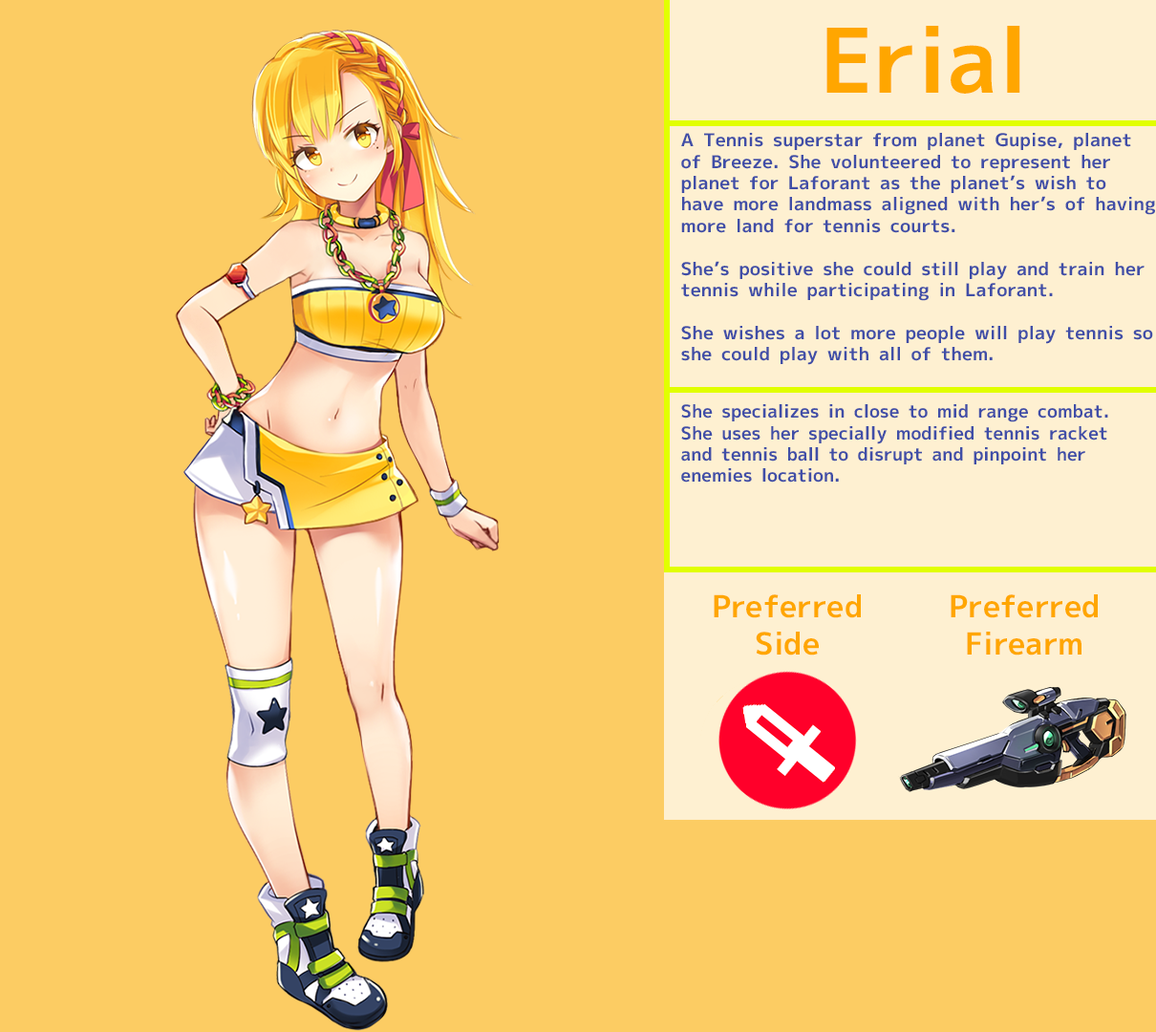
<style>
.page{position:relative;width:1156px;height:1032px;background:#fccc63}
.page>*{position:absolute;margin:0}
.t1{font:89.2px "MigMix-2P-Bold";color:#ffa600}
.t2{font:17.8px "MigMix-2P-Bold";color:#404ea7;scale:1.03 1}
.t3{font:17.8px "MigMix-2P-Bold";color:#404ea7}
.t4{font:30.6px "MigMix-2P-Bold";color:#ffa600}
</style>
<div class="page">
<p class="t1" style="left:826px;top:26px;width:194px;height:68px">Erial</p>
<p class="t2" style="left:681px;top:133px;width:474px;height:232px">A Tennis superstar from planet Gupise, planet of Breeze. She volunteered to represent her planet for Laforant as the planet’s wish to have more landmass aligned with her’s of having more land for tennis courts.<br><br>She’s positive she could still play and train her tennis while participating in Laforant. <br><br>She wishes a lot more people will play tennis so she could play with all of them.</p>
<p class="t3" style="left:681px;top:404px;width:427px;height:78px">She specializes in close to mid range combat. She uses her specially modified tennis racket and tennis ball to disrupt and pinpoint her enemies location.</p>
<p class="t4" style="left:714px;top:594px;width:147px;height:61px;text-align:center">Preferred<br>Side</p>
<p class="t4" style="left:950px;top:594px;width:148px;height:61px;text-align:center">Preferred<br>Firearm</p>
</div>
